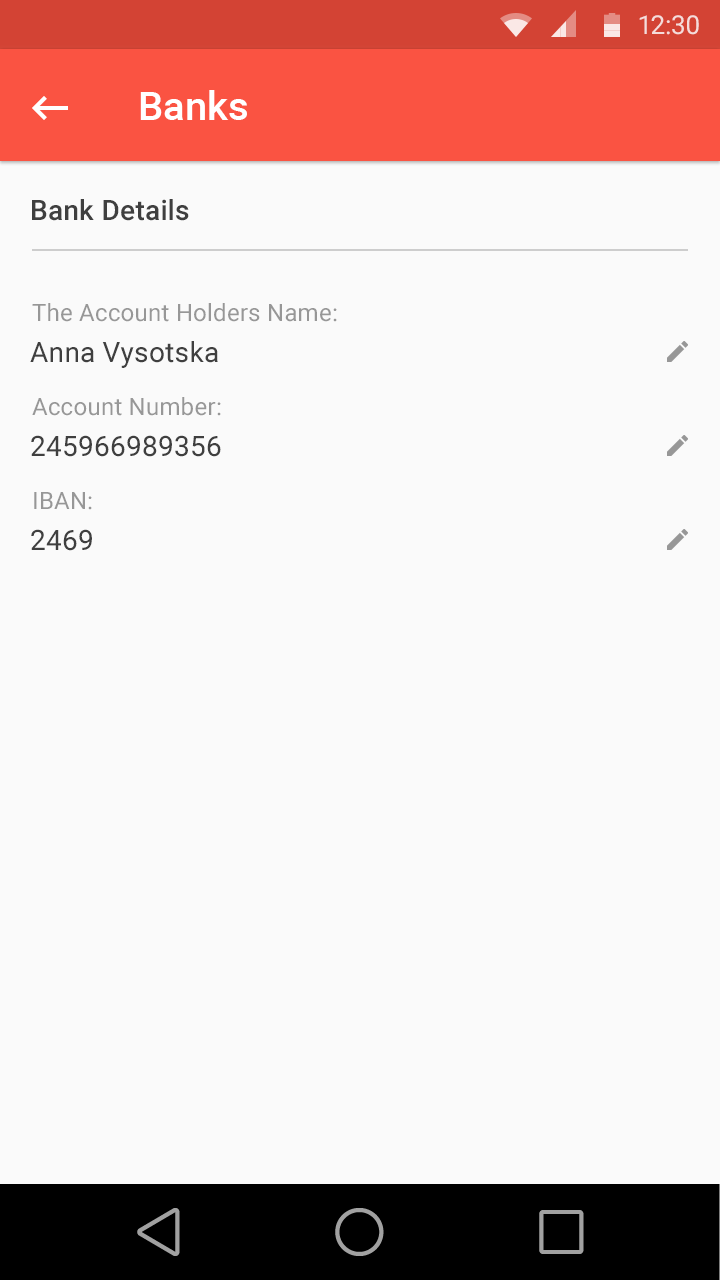
<style>
.page{position:relative;width:720px;height:1280px;background:#fafafa}
.page>*{position:absolute;margin:0}
.t1{font:40px "Roboto-Medium";color:#ffffff}
.t2{font:28px "Roboto-Medium";letter-spacing:0.01em;color:#3f3f3f}
.t3{font:24px "Roboto-Regular";letter-spacing:0.01em;color:#979797}
.t4{font:28px "Roboto-Regular";letter-spacing:0.01em;color:#3f3f3f}
</style>
<div class="page">
<p class="t1" style="left:140px;top:90px;width:107px;height:30px">Banks</p>
<p class="t2" style="left:32px;top:199px;width:157px;height:22px">Bank Details</p>
<p class="t3" style="left:32px;top:303px;width:305px;height:19px">The Account Holders Name:</p>
<p class="t4" style="left:30px;top:341px;width:188px;height:27px">Anna Vysotska</p>
<p class="t3" style="left:32px;top:397px;width:189px;height:19px">Account Number:</p>
<p class="t4" style="left:31px;top:435px;width:190px;height:22px">245966989356</p>
<p class="t3" style="left:34px;top:492px;width:58px;height:18px">IBAN:</p>
<p class="t4" style="left:31px;top:529px;width:61px;height:22px">2469</p>
</div>
